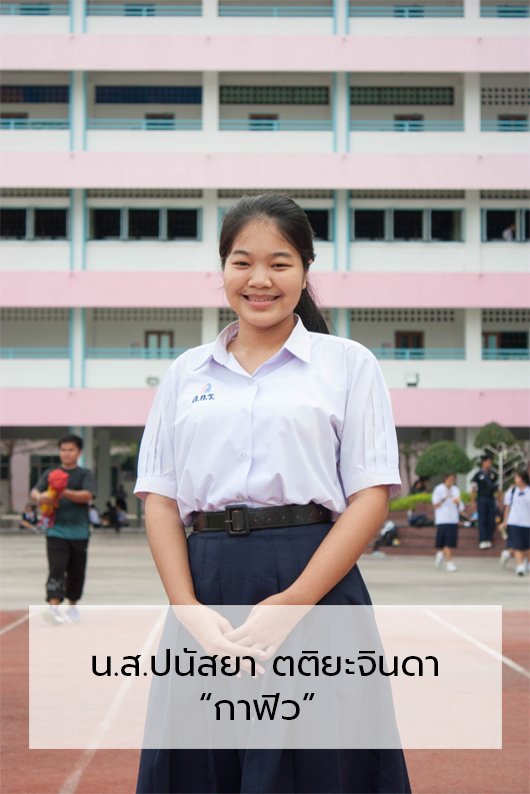
<style>
.page{position:relative;width:530px;height:794px}
.page>*{position:absolute;margin:0}
.t1{font:36.7px "Prompt-Regular";color:#000000}
</style>
<div class="page">
<p class="t1" style="left:92px;top:648px;width:346px;height:72px">น.ส.ปนัสยา ตติยะจินดา<br>        “กาฟิว”</p>
</div>
